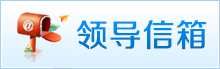
<style>
.page{position:relative;width:220px;height:69px}
.page>*{position:absolute;margin:0}
.t1{font:32px "FZZZHUNHJW--GB1-0";letter-spacing:0.04em}
</style>
<div class="page">
<p class="t1" style="left:77px;top:20px;width:130px;height:30px">领导信箱</p>
</div>
